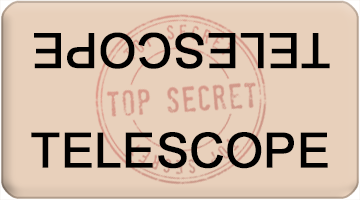
<style>
.page{position:relative;width:360px;height:200px;background:#e8d0bb}
.page>*{position:absolute;margin:0}
.t1{font:48px "ArialMT";color:#000000;font-weight:bold}
</style>
<div class="page">
<p class="t1" style="left:34px;top:32px;width:296px;height:37px;rotate:180deg">TELESCOPE</p>
<p class="t1" style="left:31px;top:132px;width:297px;height:37px">TELESCOPE</p>
</div>
